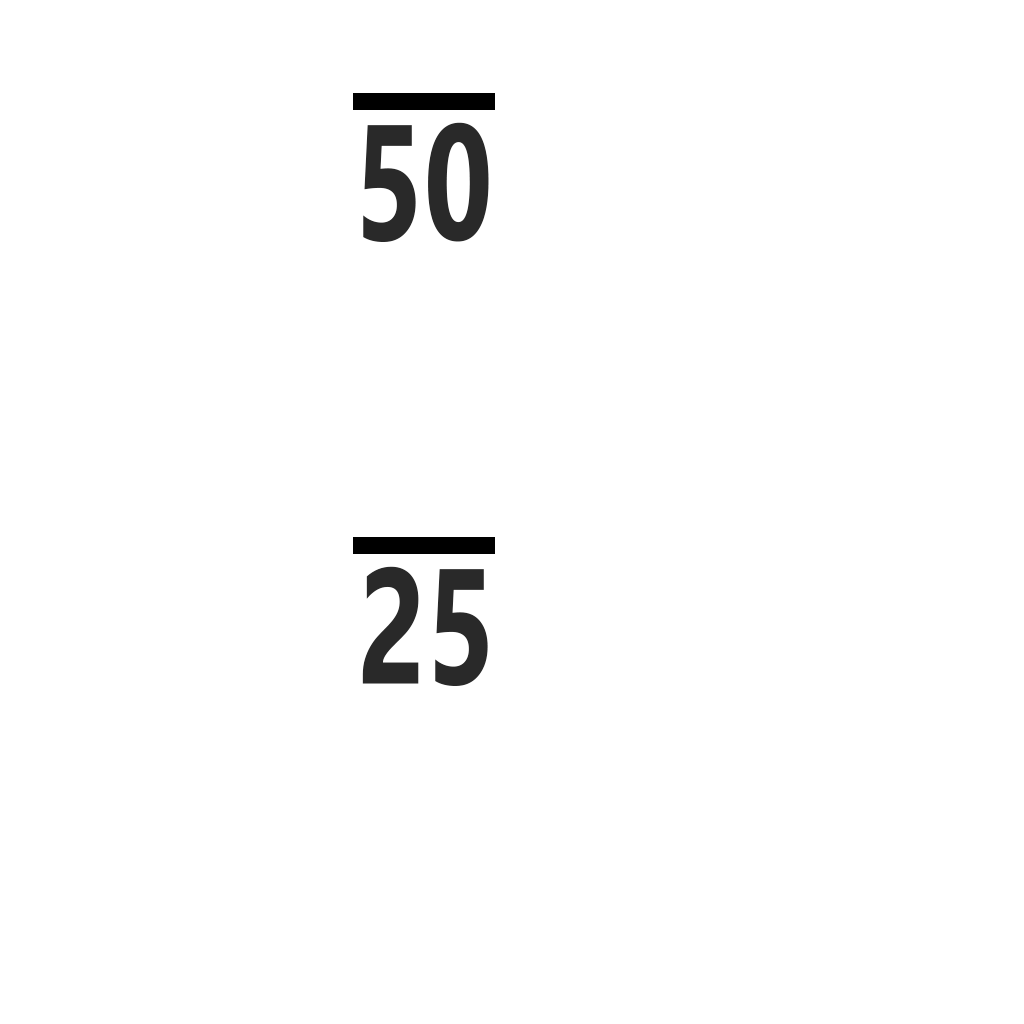
<style>
.page{position:relative;width:1024px;height:1024px;background:#ffffff}
.page>*{position:absolute;margin:0}
.t1{font:164px "Ebrima-Bold";color:#292929;scale:0.73 1}
</style>
<div class="page">
<p class="t1" style="left:363px;top:122px;width:126px;height:120px">50</p>
<p class="t1" style="left:362px;top:566px;width:126px;height:120px">25</p>
</div>
